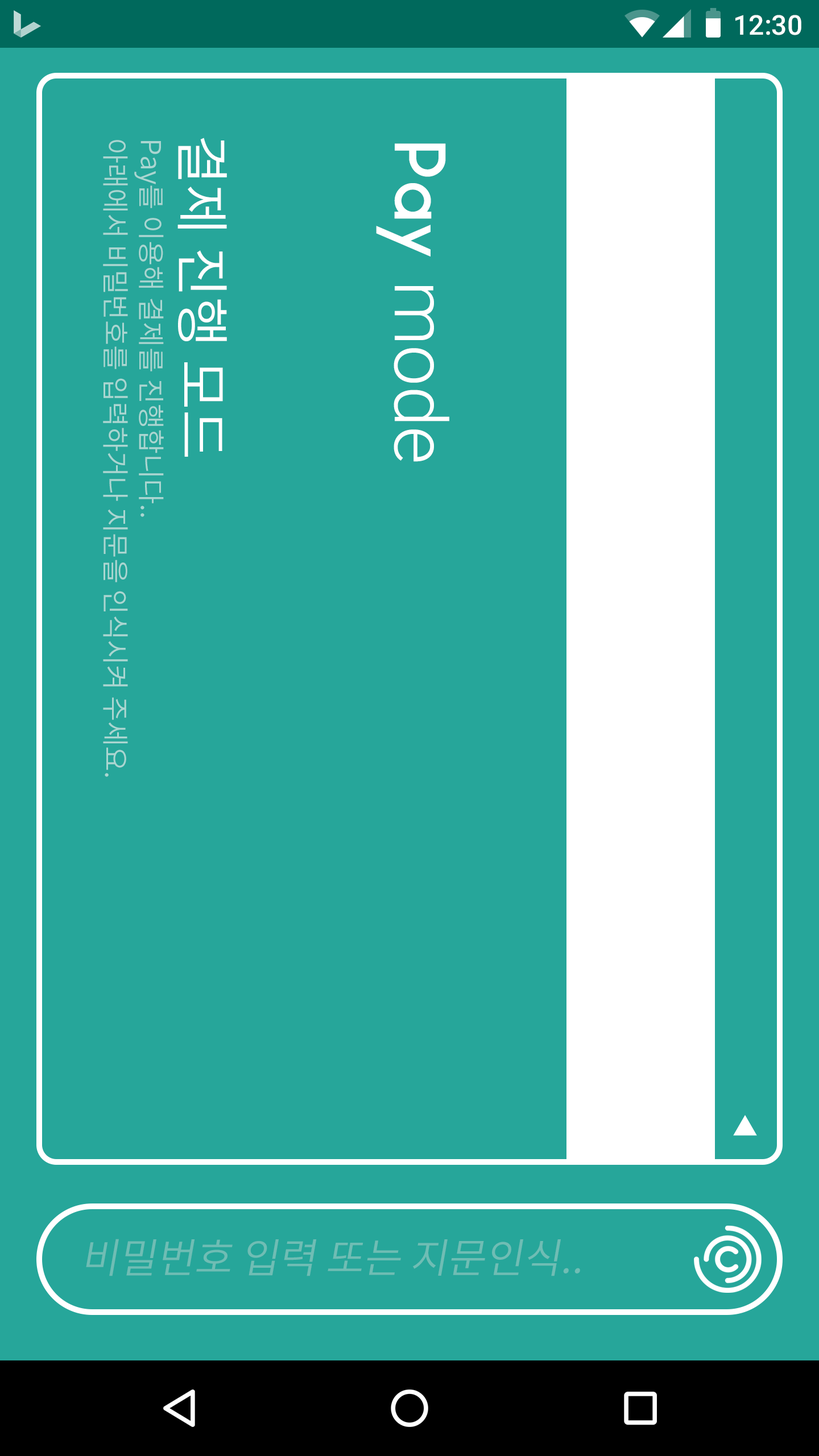
<style>
.page{position:relative;width:819px;height:1456px;background:#26a69a}
.page>*{position:absolute;margin:0}
.t1{font:27.3px "Roboto-Medium";color:#ffffff}
.t2{font:54.6px "NotoSansCJKkr-DemiLight";color:#ffffff}
.t3{font:27.3px "NotoSansCJKkr-DemiLight";color:#aad6d1}
.t4{font:72.8px "Roboto-Light";color:#ffffff}
.t5{font:72.8px "Ikaros";color:#ffffff}
.t6{font:40.9px "NotoSansCJKkr-DemiLight";color:#6fbdb4;font-style:italic}
</style>
<div class="page">
<p class="t1" style="left:735px;top:15px;width:66px;height:20px">12:30</p>
<p class="t2" style="left:177px;top:138px;width:50px;height:319px;rotate:90deg">결제 진행 모드</p>
<p class="t3" style="left:103px;top:140px;width:25px;height:637px;rotate:90deg">아래에서 비밀번호를 입력하거나 지문을 인식시켜 주세요.</p>
<p class="t3" style="left:134px;top:141px;width:30px;height:376px;rotate:90deg">Pay를 이용해 결제를 진행합니다..</p>
<p class="t4" style="left:376px;top:143px;width:73px;height:319px;rotate:90deg"><span class="t5">Pay </span>mode</p>
<p class="t6" style="left:86px;top:1239px;width:494px;height:37px">비밀번호 입력 또는 지문인식..</p>
</div>
